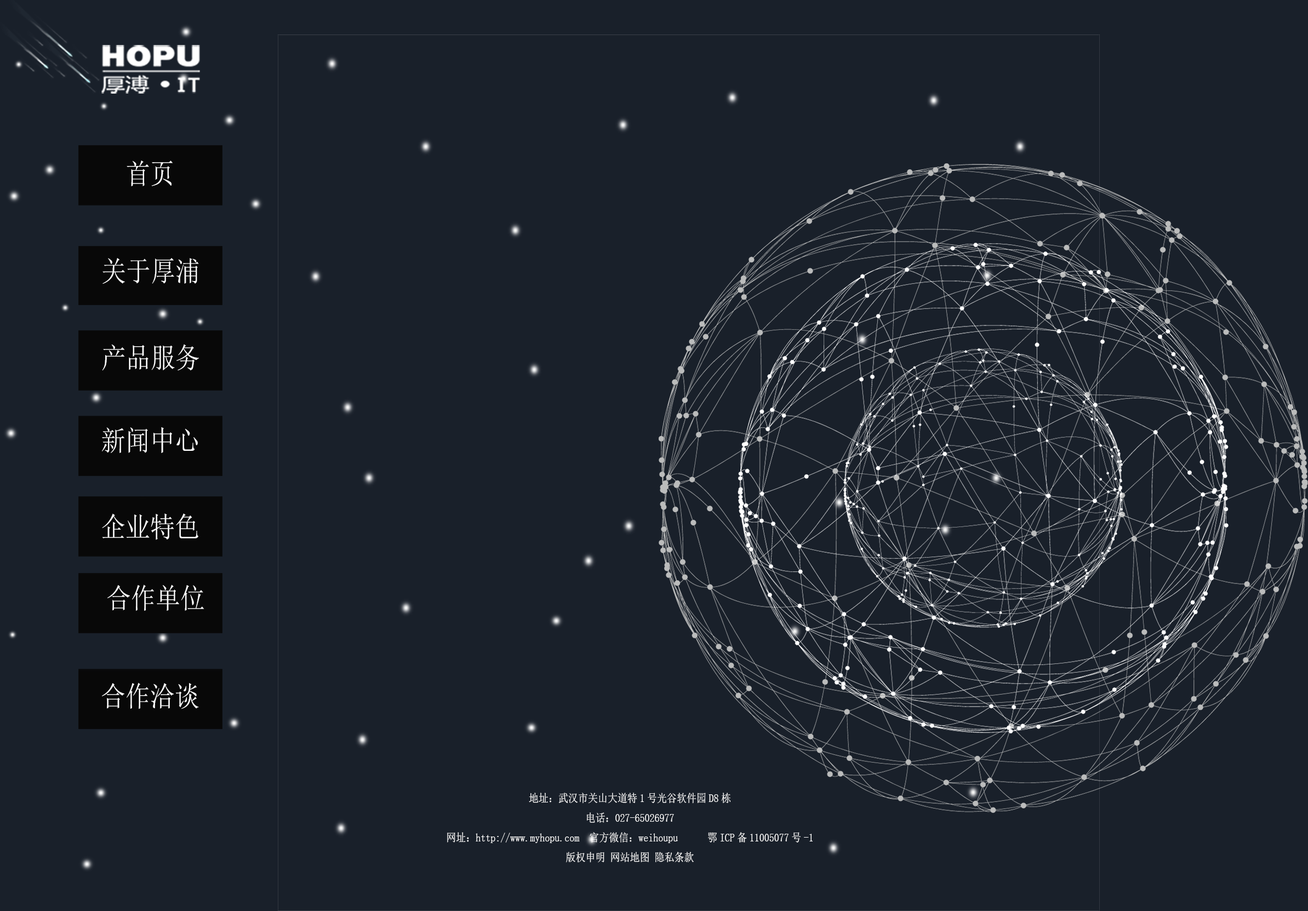
<style>
.page{position:relative;width:1308px;height:911px;background:#19202a}
.page>*{position:absolute;margin:0}
.t1{font:28.3px "SimSun";color:#ffffff;scale:0.87 1}
.t2{font:28.3px "SimSun";color:#fdfdfd;scale:0.87 1}
.t3{font:11.3px "SimSun";color:#fdfdfd;scale:0.87 1}
</style>
<div class="page">
<p class="t1" style="left:127px;top:161px;width:46px;height:25px">首页</p>
<p class="t2" style="left:102px;top:258px;width:97px;height:26px">关于厚浦</p>
<p class="t2" style="left:102px;top:344px;width:97px;height:27px">产品服务</p>
<p class="t2" style="left:102px;top:427px;width:96px;height:26px">新闻中心</p>
<p class="t2" style="left:102px;top:514px;width:96px;height:26px">企业特色</p>
<p class="t2" style="left:107px;top:585px;width:97px;height:26px">合作单位</p>
<p class="t2" style="left:102px;top:683px;width:97px;height:26px">合作洽谈</p>
<p class="t3" style="left:447px;top:793px;width:366px;height:70px;text-align:center">地址：武汉市关山大道特1号光谷软件园D8栋<br>电话：027-65026977<br>网址：http://www.myhopu.com　官方微信：weihoupu　　　鄂ICP备11005077号-1<br>版权申明 网站地图 隐私条款</p>
</div>
